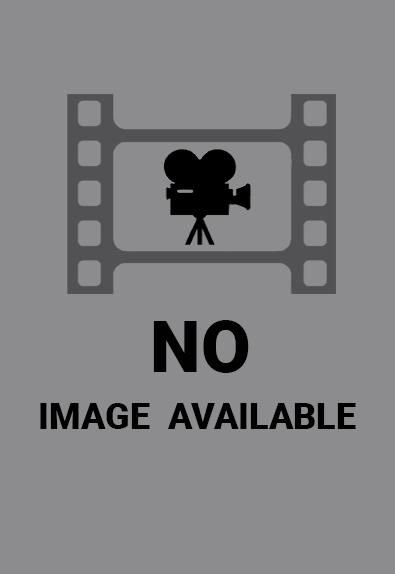
<style>
.page{position:relative;width:395px;height:574px;background:#8c8c8f}
.page>*{position:absolute;margin:0}
.t1{font:72px "Roboto-Black";color:#010101}
.t2{font:36px "Roboto-Black";color:#000000}
</style>
<div class="page">
<p class="t1" style="left:153px;top:320px;width:96px;height:53px">NO</p>
<p class="t2" style="left:40px;top:403px;width:316px;height:26px">IMAGE  AVAILABLE</p>
</div>
